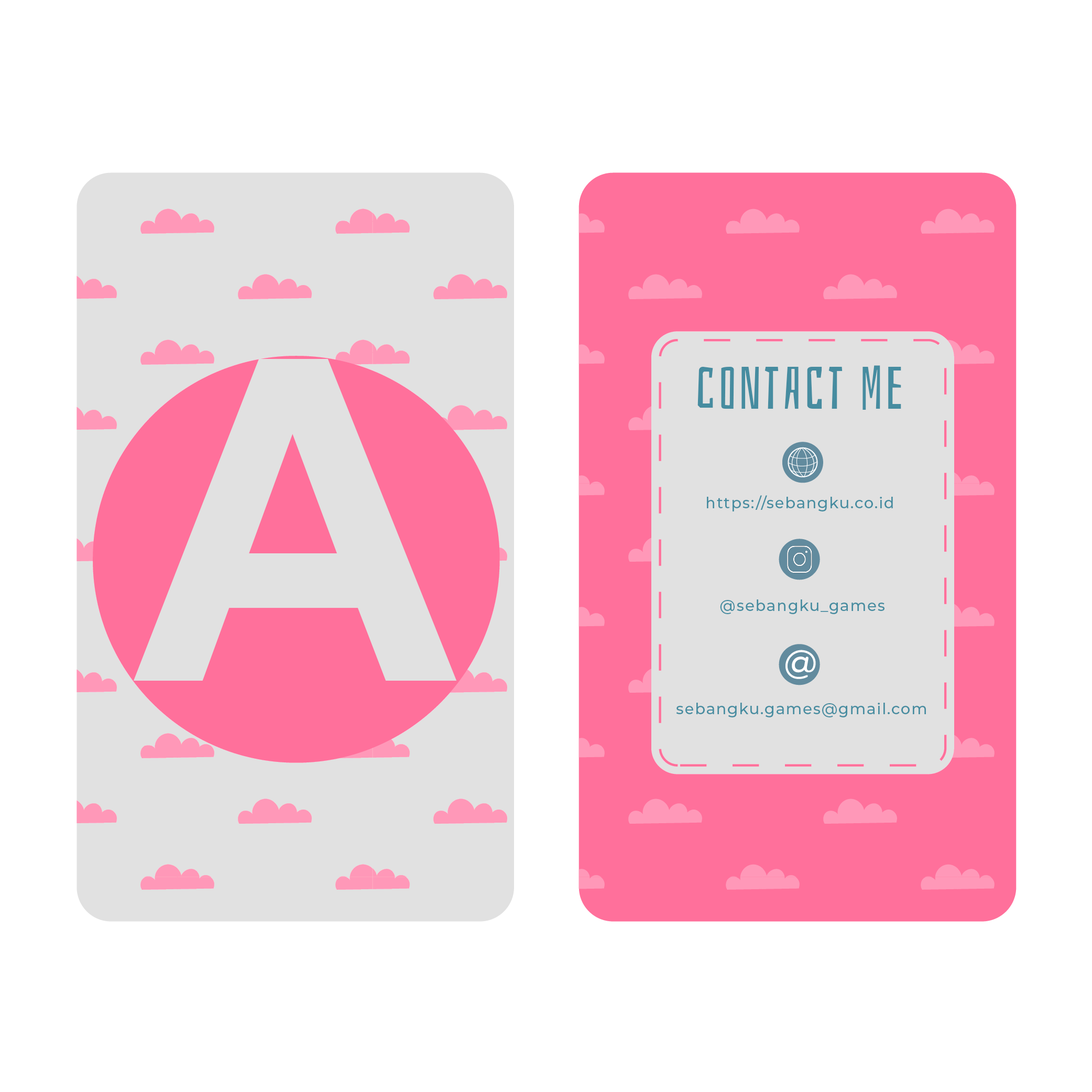
<style>
.page{position:relative;width:1092px;height:1092px;background:#ffffff}
.page>*{position:absolute;margin:0}
.t1{font:449.8px "Arial-BoldMT";letter-spacing:0.057em;color:#e1e1e1}
.t2{font:58.9px "Bahiana-Regular";letter-spacing:0.057em;color:#468ca0}
.t3{font:15.3px "Montserrat-Medium";letter-spacing:0.057em;color:#468ca0}
</style>
<div class="page">
<p class="t1" style="left:134px;top:359px;width:323px;height:322px">A</p>
<p class="t2" style="left:697px;top:365px;width:204px;height:45px">contact me</p>
<p class="t3" style="left:707px;top:495px;width:186px;height:16px">https://sebangku.co.id</p>
<p class="t3" style="left:720px;top:599px;width:164px;height:15px">@sebangku_games</p>
<p class="t3" style="left:676px;top:703px;width:250px;height:14px">sebangku.games@gmail.com</p>
</div>
